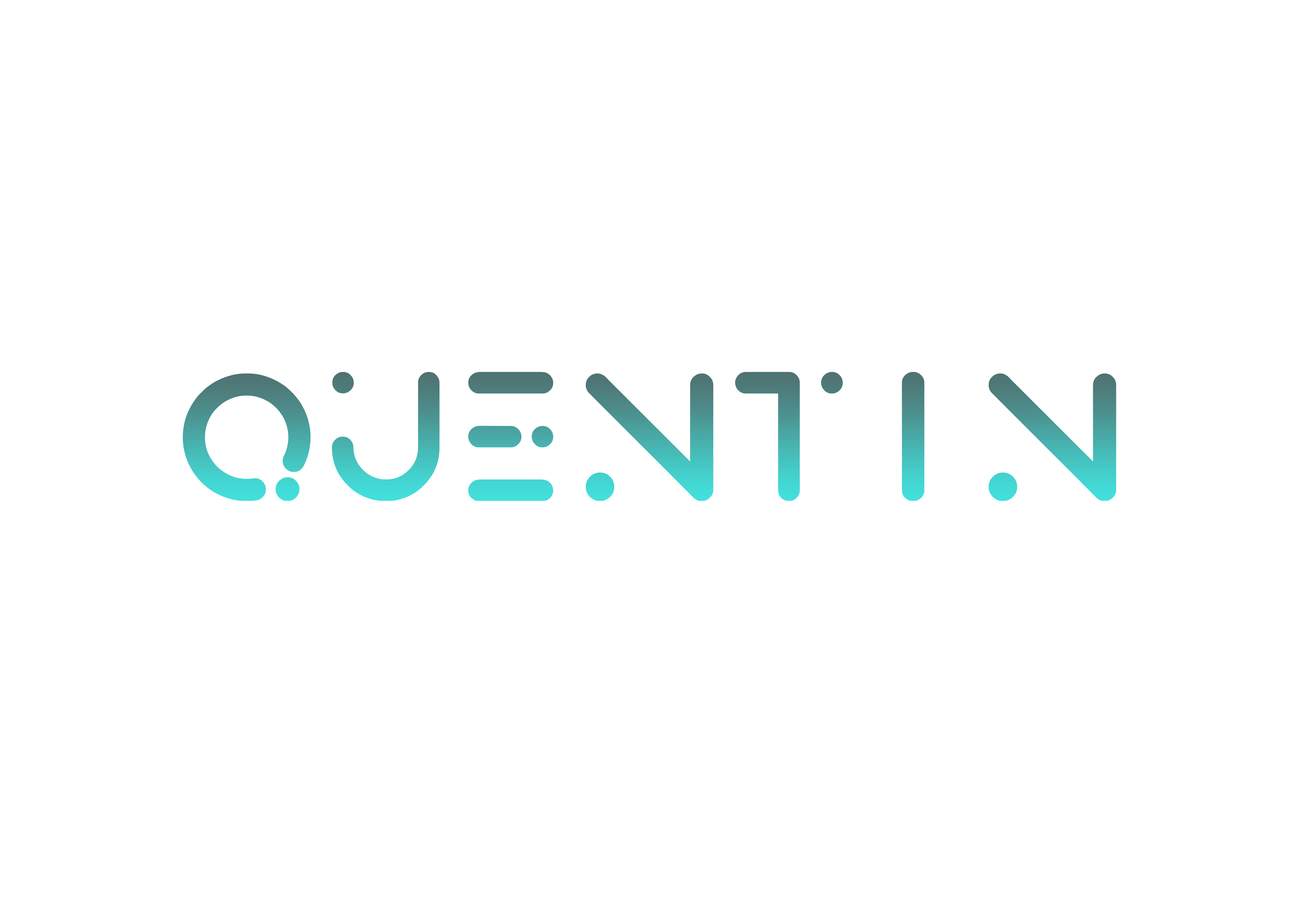
<style>
.page{position:relative;width:1299px;height:918px;background:#ffffff}
.page>*{position:absolute;margin:0}
.t1{font:154.3px "Alexana";letter-spacing:-0.025em;text-transform:uppercase}
</style>
<div class="page">
<p class="t1" style="left:183px;top:372px;width:933px;height:129px">Quentin</p>
</div>
